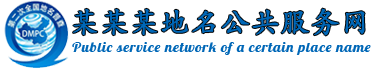
<style>
.page{position:relative;width:380px;height:70px;background:#ffffff}
.page>*{position:absolute;margin:0}
.t1{font:28.5px "FZKTJW--GB1-0";letter-spacing:0.06em;color:#0067b7;font-weight:bold}
.t2{font:14px "Lobster-Regular";letter-spacing:0.06em;color:#0067b7;scale:1.05 1}
</style>
<div class="page">
<p class="t1" style="left:73px;top:8px;width:292px;height:28px">某某某地名公共服务网</p>
<p class="t2" style="left:72px;top:42px;width:299px;height:13px">Public service network of a certain place name</p>
</div>
